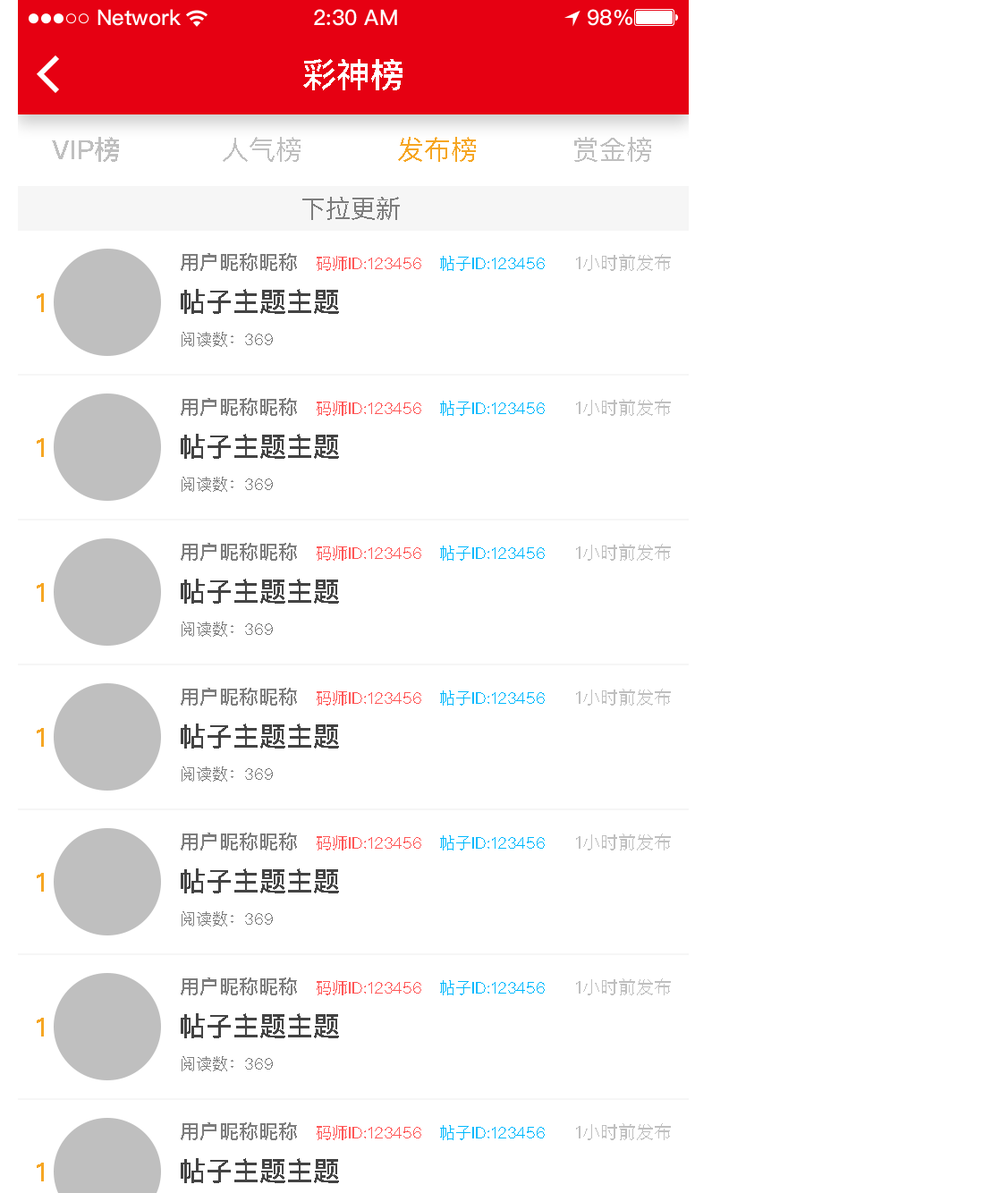
<style>
.page{position:relative;width:1000px;height:1193px;background:#ffffff}
.page>*{position:absolute;margin:0}
.t1{font:34px "PingFangSC-Medium";color:#ffffff;text-transform:uppercase}
.t2{font:26.8px "PingFangSC-Medium";color:#bfbfbf;text-transform:uppercase}
.t3{font:26.8px "PingFangSC-Regular";color:#bfbfbf;text-transform:uppercase}
.t4{font:26.8px "PingFangSC-Regular";color:#f6a623;text-transform:uppercase}
.t5{font:25px "PingFangSC-Regular";color:#7d7d7d;text-transform:uppercase}
.t6{font:19.7px "PingFangSC-Medium";color:#7d7d7d;text-transform:uppercase}
.t7{font:16.1px "PingFangSC-Regular";color:#ff5858;text-transform:uppercase}
.t8{font:16.1px "PingFangSC-Regular";color:#01b9fd;text-transform:uppercase}
.t9{font:17.9px "PingFangSC-Regular";color:#bfbfbf;text-transform:uppercase}
.t10{font:26.8px "PingFangSC-Medium";color:#f6a623;text-transform:uppercase}
.t11{font:26.8px "PingFangSC-Medium";color:#434343;text-transform:uppercase}
.t12{font:16.1px "PingFangSC-Regular";color:#7d7d7d;text-transform:uppercase}
</style>
<div class="page">
<p class="t1" style="left:303px;top:59px;width:99px;height:31px">彩神榜</p>
<p class="t2" style="left:52px;top:137px;width:67px;height:25px">vip榜</p>
<p class="t3" style="left:223px;top:137px;width:77px;height:25px">人气榜</p>
<p class="t4" style="left:398px;top:137px;width:78px;height:25px">发布榜</p>
<p class="t3" style="left:574px;top:137px;width:77px;height:25px">赏金榜</p>
<p class="t5" style="left:302px;top:197px;width:98px;height:23px">下拉更新</p>
<p class="t6" style="left:181px;top:253px;width:116px;height:18px">用户昵称昵称</p>
<p class="t7" style="left:317px;top:256px;width:104px;height:15px">码师id:123456</p>
<p class="t8" style="left:440px;top:256px;width:105px;height:15px">帖子id:123456</p>
<p class="t9" style="left:576px;top:254px;width:95px;height:17px">1小时前发布</p>
<p class="t10" style="left:37px;top:293px;width:7px;height:19px">1</p>
<p class="t11" style="left:181px;top:289px;width:158px;height:25px">帖子主题主题</p>
<p class="t12" style="left:182px;top:332px;width:91px;height:15px">阅读数：369</p>
<p class="t6" style="left:181px;top:398px;width:116px;height:18px">用户昵称昵称</p>
<p class="t7" style="left:317px;top:401px;width:104px;height:15px">码师id:123456</p>
<p class="t8" style="left:440px;top:401px;width:105px;height:15px">帖子id:123456</p>
<p class="t9" style="left:576px;top:399px;width:95px;height:17px">1小时前发布</p>
<p class="t11" style="left:181px;top:434px;width:158px;height:25px">帖子主题主题</p>
<p class="t10" style="left:37px;top:438px;width:7px;height:19px">1</p>
<p class="t12" style="left:182px;top:477px;width:91px;height:15px">阅读数：369</p>
<p class="t6" style="left:181px;top:543px;width:116px;height:18px">用户昵称昵称</p>
<p class="t7" style="left:317px;top:545px;width:104px;height:16px">码师id:123456</p>
<p class="t8" style="left:440px;top:545px;width:105px;height:16px">帖子id:123456</p>
<p class="t9" style="left:576px;top:544px;width:95px;height:17px">1小时前发布</p>
<p class="t11" style="left:181px;top:579px;width:158px;height:25px">帖子主题主题</p>
<p class="t10" style="left:37px;top:583px;width:7px;height:19px">1</p>
<p class="t12" style="left:182px;top:621px;width:91px;height:16px">阅读数：369</p>
<p class="t6" style="left:181px;top:688px;width:116px;height:17px">用户昵称昵称</p>
<p class="t9" style="left:576px;top:689px;width:95px;height:16px">1小时前发布</p>
<p class="t7" style="left:317px;top:690px;width:104px;height:15px">码师id:123456</p>
<p class="t8" style="left:440px;top:690px;width:105px;height:15px">帖子id:123456</p>
<p class="t11" style="left:181px;top:723px;width:158px;height:25px">帖子主题主题</p>
<p class="t10" style="left:37px;top:728px;width:7px;height:19px">1</p>
<p class="t12" style="left:182px;top:766px;width:91px;height:16px">阅读数：369</p>
<p class="t6" style="left:181px;top:832px;width:116px;height:18px">用户昵称昵称</p>
<p class="t9" style="left:576px;top:833px;width:95px;height:17px">1小时前发布</p>
<p class="t7" style="left:317px;top:835px;width:104px;height:15px">码师id:123456</p>
<p class="t8" style="left:440px;top:835px;width:105px;height:15px">帖子id:123456</p>
<p class="t11" style="left:181px;top:868px;width:158px;height:25px">帖子主题主题</p>
<p class="t10" style="left:37px;top:873px;width:7px;height:18px">1</p>
<p class="t12" style="left:182px;top:911px;width:91px;height:15px">阅读数：369</p>
<p class="t6" style="left:181px;top:977px;width:116px;height:18px">用户昵称昵称</p>
<p class="t7" style="left:317px;top:980px;width:104px;height:15px">码师id:123456</p>
<p class="t8" style="left:440px;top:980px;width:105px;height:15px">帖子id:123456</p>
<p class="t9" style="left:576px;top:978px;width:95px;height:17px">1小时前发布</p>
<p class="t11" style="left:181px;top:1013px;width:158px;height:25px">帖子主题主题</p>
<p class="t10" style="left:37px;top:1018px;width:7px;height:18px">1</p>
<p class="t12" style="left:182px;top:1056px;width:91px;height:15px">阅读数：369</p>
<p class="t6" style="left:181px;top:1122px;width:116px;height:18px">用户昵称昵称</p>
<p class="t7" style="left:317px;top:1125px;width:104px;height:15px">码师id:123456</p>
<p class="t8" style="left:440px;top:1125px;width:105px;height:15px">帖子id:123456</p>
<p class="t9" style="left:576px;top:1123px;width:95px;height:17px">1小时前发布</p>
<p class="t11" style="left:181px;top:1158px;width:158px;height:25px">帖子主题主题</p>
<p class="t10" style="left:37px;top:1162px;width:7px;height:19px">1</p>
</div>
